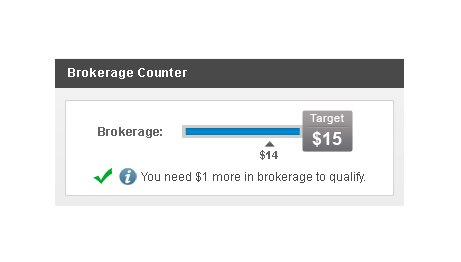
<style>
.page{position:relative;width:461px;height:262px;background:#ffffff}
.page>*{position:absolute;margin:0}
.t1{font:12px "Arial-BoldMT";letter-spacing:0.06em;color:#ffffff}
.t2{font:11px "ArialMT";letter-spacing:0.06em;color:#ffffff}
.t3{font:12px "Arial-BoldMT";letter-spacing:0.02em;color:#626262}
.t4{font:18px "Arial-BoldMT";color:#ffffff}
.t5{font:11px "Arial-BoldMT";color:#626262}
.t6{font:12px "ArialMT";color:#4a4949}
</style>
<div class="page">
<p class="t1" style="left:68px;top:68px;width:119px;height:11px">Brokerage Counter</p>
<p class="t2" style="left:310px;top:114px;width:34px;height:10px">Target</p>
<p class="t3" style="left:98px;top:127px;width:64px;height:11px">Brokerage:</p>
<p class="t4" style="left:312px;top:131px;width:30px;height:16px">$15</p>
<p class="t5" style="left:260px;top:150px;width:18px;height:10px">$14</p>
<p class="t6" style="left:141px;top:172px;width:224px;height:11px">You need $1 more in brokerage to qualify.</p>
</div>
